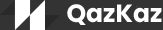
<style>
.page{position:relative;width:163px;height:30px;background:#333333}
.page>*{position:absolute;margin:0}
.t1{font:25px "PoppinsLatin-Bold";color:#ffffff}
</style>
<div class="page">
<p class="t1" style="left:67px;top:4px;width:95px;height:21px">QazKaz</p>
</div>
